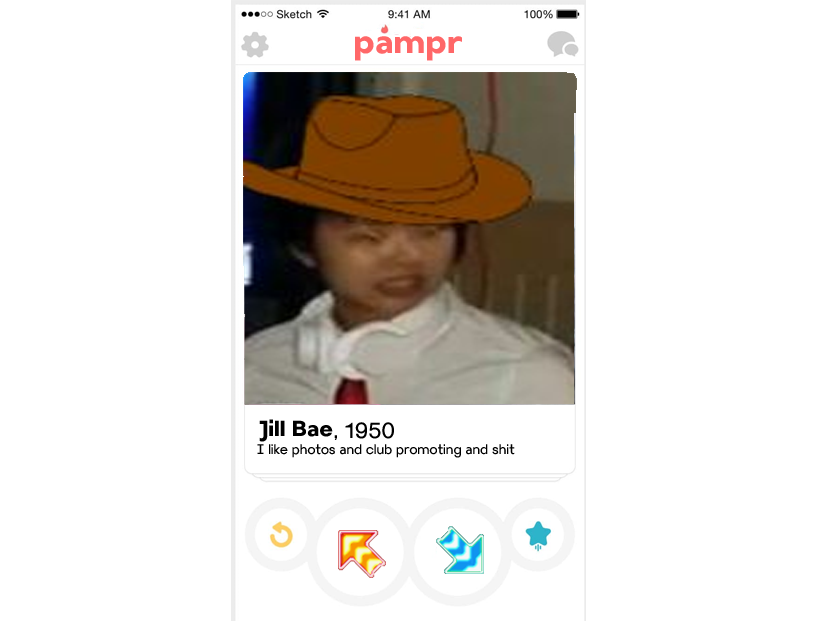
<style>
.page{position:relative;width:816px;height:624px;background:#ffffff}
.page>*{position:absolute;margin:0}
.t1{font:32px "Villeray-Bold";color:#ff6768}
.t2{font:13.3px "Villeray-Regular";color:#000000}
.t3{font:21.3px "Villeray-Regular";color:#000000}
.t4{font:21.3px "Villeray-Bold";color:#000000}
</style>
<div class="page">
<p class="t1" style="left:355px;top:36px;width:107px;height:25px">pampr</p>
<p class="t2" style="left:257px;top:422px;width:258px;height:36px"><span class="t3">            , 1950<br></span>I like photos and club promoting and shit</p>
<p class="t4" style="left:259px;top:419px;width:74px;height:23px">Jill Bae</p>
</div>
